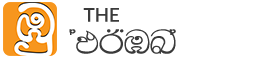
<style>
.page{position:relative;width:255px;height:59px;background:#ffffff}
.page>*{position:absolute;margin:0}
.t1{font:19.1px "Lato-Semibold";color:#3a3a3a}
.t2{font:40.2px "AMS-Bindu";color:#3a3a3a;scale:1.08 1}
</style>
<div class="page">
<p class="t1" style="left:83px;top:8px;width:36px;height:14px">THE</p>
<p class="t2" style="left:69px;top:29px;width:107px;height:25px">AMBULA</p>
</div>
